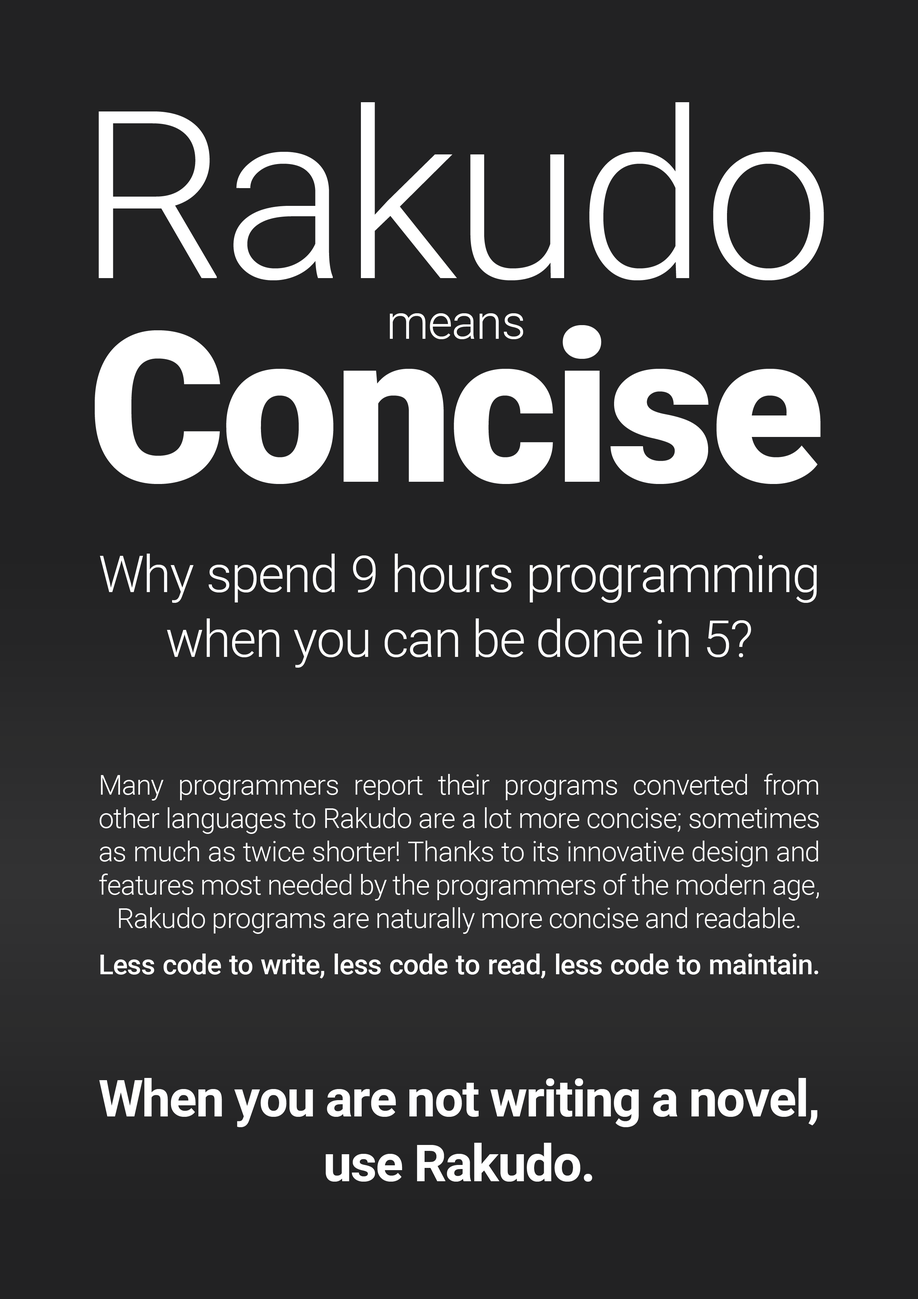
<style>
.page{position:relative;width:918px;height:1299px;background:#222223}
.page>*{position:absolute;margin:0}
.t1{font:234.5px "Roboto-Light";letter-spacing:-0.02em;color:#ffffff}
.t2{font:47.8px "Roboto-Light";letter-spacing:-0.02em;color:#ffffff}
.t3{font:209.8px "Roboto-Black";letter-spacing:-0.02em;color:#ffffff}
.t4{font:50.9px/64.8px "Roboto-Light";letter-spacing:-0.02em;color:#ffffff}
.t5{font:27.8px "Roboto-Light";letter-spacing:-0.02em;color:#ffffff}
.t6{font:27.8px/47.8px "Roboto-Medium";letter-spacing:-0.02em;color:#ffffff}
.t7{font:50.9px/64.8px "Roboto-Bold";letter-spacing:-0.02em;color:#ffffff}
</style>
<div class="page">
<p class="t1" style="left:98px;top:102px;width:726px;height:178px">Rakudo</p>
<p class="t2" style="left:390px;top:313px;width:133px;height:26px">means</p>
<p class="t3" style="left:95px;top:325px;width:726px;height:159px"><span class="t1"><br></span>Concise</p>
<p class="t4" style="left:100px;top:553px;width:717px;height:115px;text-align:justify">Why spend 9 hours programming when you can be done in 5?</p>
<p class="t5" style="left:99px;top:773px;width:720px;height:205px;text-align:justify">Many programmers report their programs converted from other languages to Rakudo are a lot more concise; sometimes as much as twice shorter! Thanks to its innovative design and features most needed by the programmers of the modern age, Rakudo programs are naturally more concise and readable.<br><span class="t6">Less code to write, less code to read, less code to maintain.</span></p>
<p class="t7" style="left:99px;top:1078px;width:718px;height:103px;text-align:justify">When you are not writing a novel, use Rakudo.</p>
</div>
